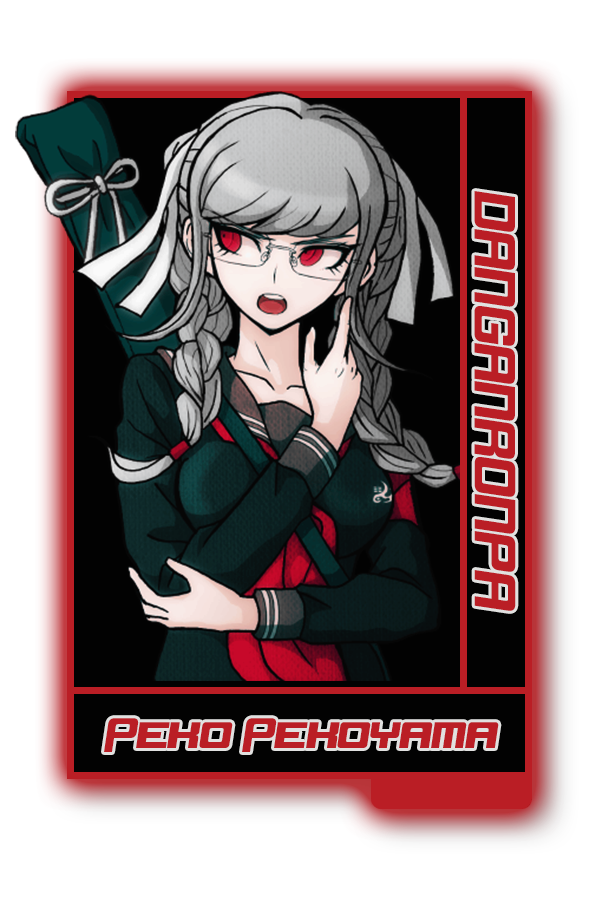
<style>
.page{position:relative;width:600px;height:900px;background:#ffffff}
.page>*{position:absolute;margin:0}
.t1{font:48.8px "DorBlue";color:#bb2c2e}
.t2{font:40.6px "DorBlue";color:#bb2c2e}
</style>
<div class="page">
<p class="t1" style="left:474px;top:191px;width:42px;height:420px;rotate:90deg">DANGANRONPA</p>
<p class="t2" style="left:104px;top:718px;width:395px;height:34px">Peko Pekoyama</p>
</div>
